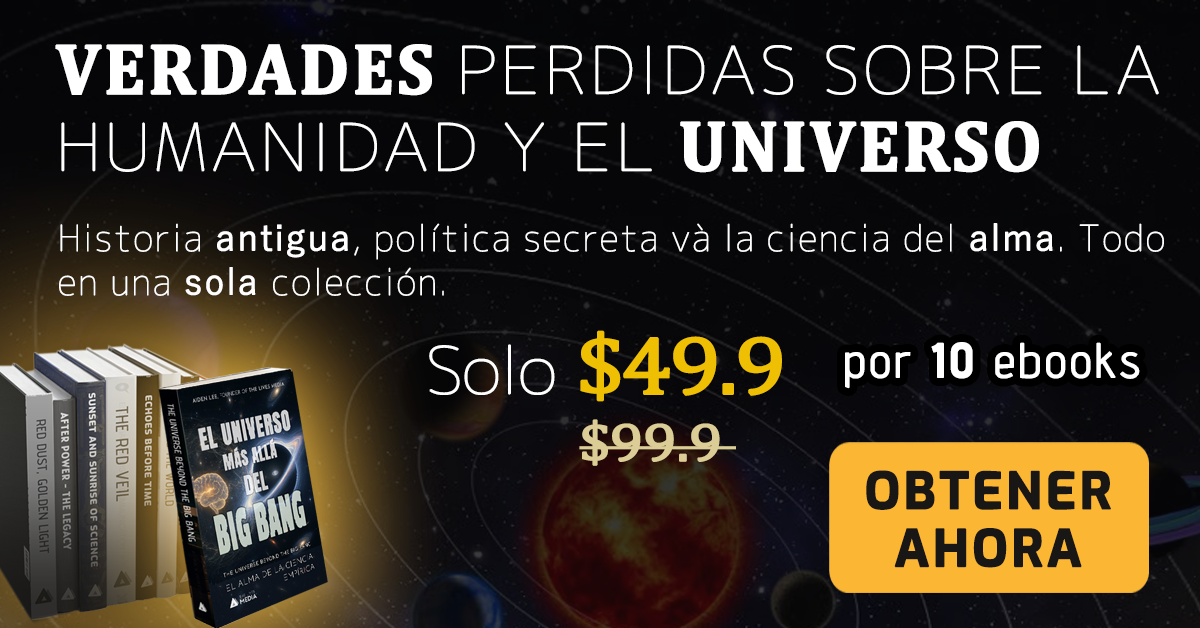
<style>
.page{position:relative;width:1200px;height:628px}
.page>*{position:absolute;margin:0}
.t1{font:64.8px/77px "Chogokuboso-Gothic";letter-spacing:0.025em;color:#ffffff;font-weight:bold;scale:1.09 1}
.t2{font:72px/77px "Cambria-Bold";letter-spacing:0.025em;color:#ffffff;font-weight:bold}
.t3{font:36px/44px "Chogokuboso-Gothic";letter-spacing:0.025em;color:#ffffff;font-weight:bold}
.t4{font:36px/44px "YuGothic-Regular";letter-spacing:0.025em;color:#ffffff;font-weight:bold}
.t5{font:82.8px "Cambria";letter-spacing:-0.05em;color:#efbf04;font-weight:bold;scale:1.11 1}
.t6{font:64.8px "Chogokuboso-Gothic";letter-spacing:-0.05em;color:#ffffff;font-weight:bold;scale:1.11 1}
.t7{font:48px "AdventPro-Regular";letter-spacing:0.05em;color:#ffffff;font-weight:bold}
.t8{font:48px "AdventPro-Bold";letter-spacing:0.05em;color:#ffffff;font-weight:bold}
.t9{font:54px "Cambria";letter-spacing:-0.025em;color:#dbcd95;font-weight:bold;scale:1.11 1}
.t10{font:50.3px/57.5px "Exo-Bold";letter-spacing:0.05em;color:#191616;font-weight:bold}
</style>
<div class="page">
<p class="t1" style="left:55px;top:44px;width:1104px;height:129px"><span class="t2">VERDADES </span>PERDIDAS SOBRE LA HUMANIDAD Y EL <span class="t2">UNIVERSO</span></p>
<p class="t3" style="left:59px;top:223px;width:1105px;height:73px">Historia <span class="t4">antigua</span>, política secreta và la ciencia del <span class="t4">alma</span>. Todo en una <span class="t4">sola </span>colección.</p>
<p class="t5" style="left:429px;top:330px;width:353px;height:72px"><span class="t6">Solo </span>$49.9</p>
<p class="t7" style="left:845px;top:342px;width:295px;height:47px">por <span class="t8">10</span> ebooks</p>
<p class="t9" style="left:579px;top:419px;width:157px;height:47px">$99.9</p>
<p class="t10" style="left:866px;top:470px;width:245px;height:98px;text-align:center">OBTENER AHORA</p>
</div>
